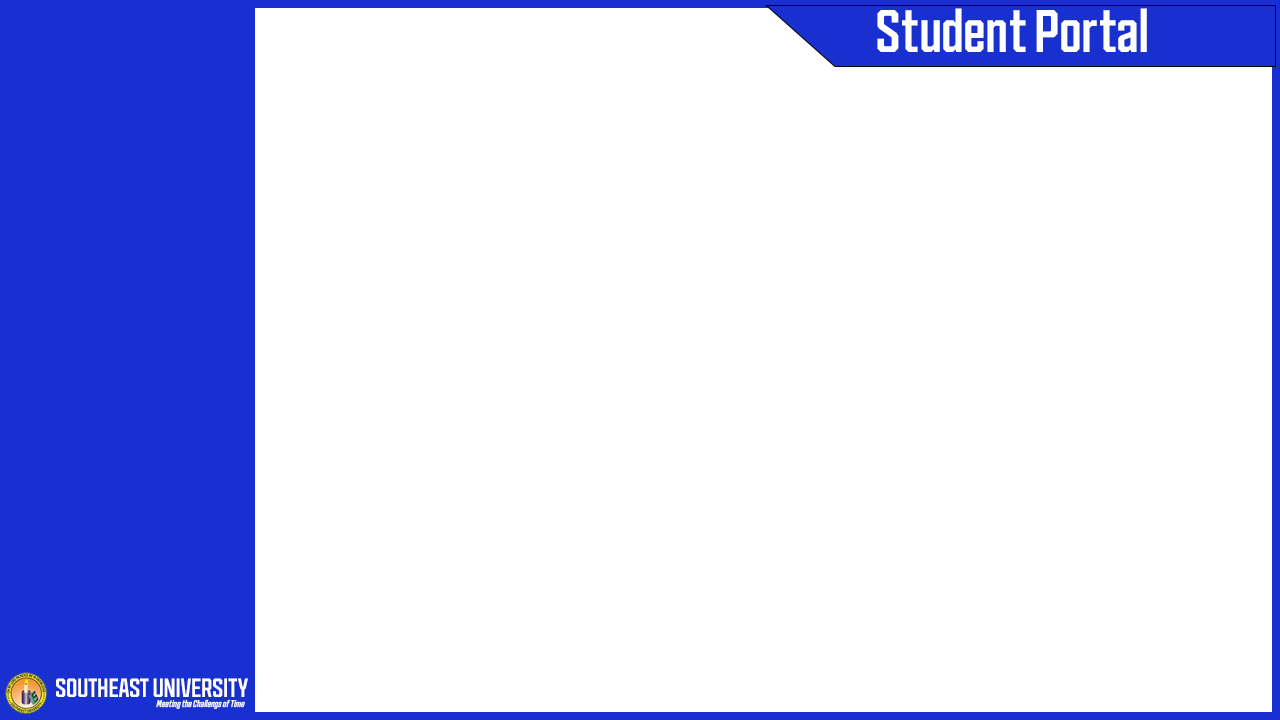
<style>
.page{position:relative;width:1280px;height:720px;background:#ffffff}
.page>*{position:absolute;margin:0}
.t1{font:60px "Cutmark-NrMedium";letter-spacing:-0.01em;color:#fefefe}
.t2{font:26.2px "Cutmark-NrMedium";letter-spacing:-0.01em;color:#fefefe}
.t3{font:9.6px "Cutmark-NrMediumItalic";letter-spacing:-0.01em;color:#fefefe}
</style>
<div class="page">
<p class="t1" style="left:877px;top:8px;width:270px;height:44px">Student Portal</p>
<p class="t2" style="left:56px;top:678px;width:192px;height:19px">SOUTHEAST UNIVERSITY</p>
<p class="t3" style="left:156px;top:699px;width:89px;height:10px">Meeting the Challengs of Time</p>
</div>
